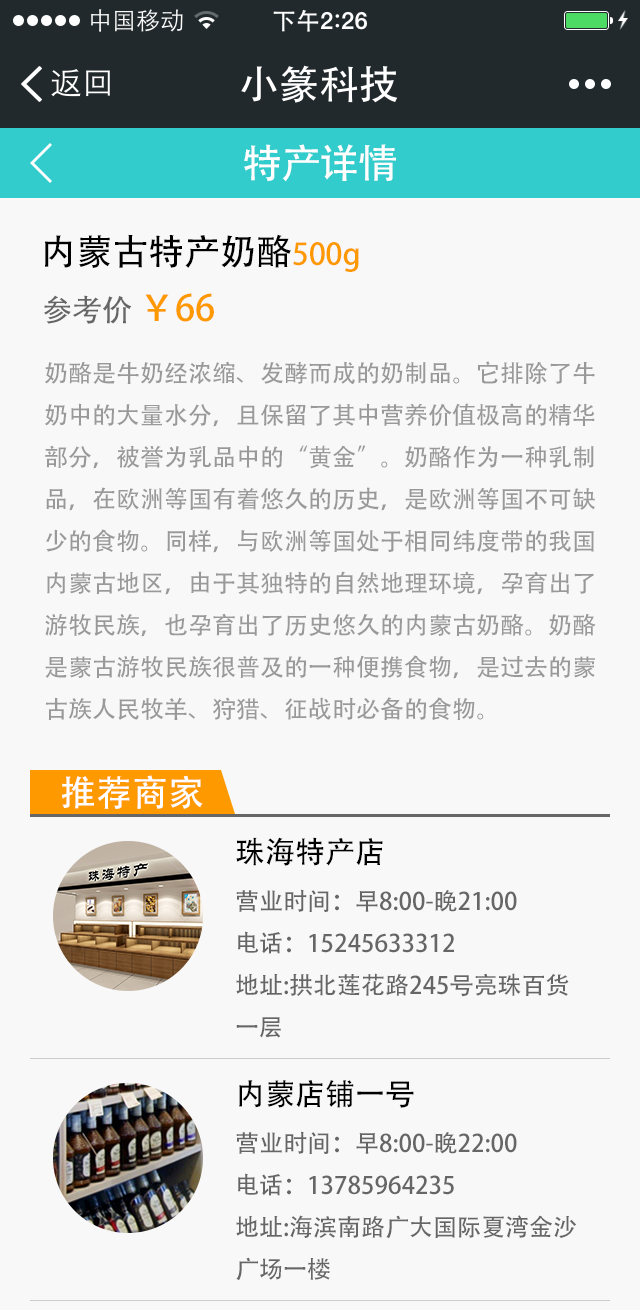
<style>
.page{position:relative;width:640px;height:1310px;background:#f8f8f8}
.page>*{position:absolute;margin:0}
.t1{font:40px "AdobeHeitiStd-Regular";color:#ffffff}
.t2{font:36px "AdobeHeitiStd-Regular";color:#000000}
.t3{font:30px "AdobeHeitiStd-Regular";color:#ff9900}
.t4{font:30px "AdobeHeitiStd-Regular";color:#666666}
.t5{font:36px "AdobeHeitiStd-Regular";color:#ff9900}
.t6{font:24px "AdobeHeitiStd-Regular";color:#999999}
.t7{font:36px "AdobeHeitiStd-Regular";color:#ffffff}
.t8{font:24px "AdobeHeitiStd-Regular";color:#666666}
.t9{font:30px "AdobeHeitiStd-Regular";color:#000000}
</style>
<div class="page">
<p class="t1" style="left:244px;top:144px;width:152px;height:38px">特产详情</p>
<p class="t2" style="left:45px;top:234px;width:314px;height:38px">内蒙古特产奶酪<span class="t3">500g</span></p>
<p class="t4" style="left:44px;top:293px;width:170px;height:31px">参考价 <span class="t5">￥66</span></p>
<p class="t6" style="left:44px;top:361px;width:552px;height:360px">奶酪是牛奶经浓缩、发酵而成的奶制品。它排除了牛<br>奶中的大量水分，且保留了其中营养价值极高的精华<br>部分，被誉为乳品中的“黄金”。奶酪作为一种乳制<br>品，在欧洲等国有着悠久的历史，是欧洲等国不可缺<br>少的食物。同样，与欧洲等国处于相同纬度带的我国<br>内蒙古地区，由于其独特的自然地理环境，孕育出了<br>游牧民族，也孕育出了历史悠久的内蒙古奶酪。奶酪<br>是蒙古游牧民族很普及的一种便携食物，是过去的蒙<br>古族人民牧羊、狩猎、征战时必备的食物。</p>
<p class="t7" style="left:61px;top:775px;width:142px;height:34px">推荐商家</p>
<p class="t8" style="left:236px;top:837px;width:333px;height:201px"><span class="t9">珠海特产店<br></span>营业时间：早8:00-晚21:00<br>电话：15245633312<br>地址:拱北莲花路245号亮珠百货<br>一层</p>
<p class="t8" style="left:236px;top:1080px;width:340px;height:201px"><span class="t9">内蒙店铺一号<br></span>营业时间：早8:00-晚22:00<br>电话：13785964235<br>地址:海滨南路广大国际夏湾金沙<br>广场一楼</p>
</div>
